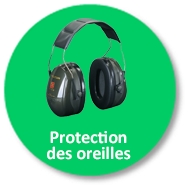
<style>
.page{position:relative;width:185px;height:185px;background:#00cc66}
.page>*{position:absolute;margin:0}
.t1{font:18px/16px "Calibri-Bold";color:#ffffff}
</style>
<div class="page">
<p class="t1" style="left:47px;top:131px;width:84px;height:29px;text-align:center">Protection  <br>des oreilles</p>
</div>
